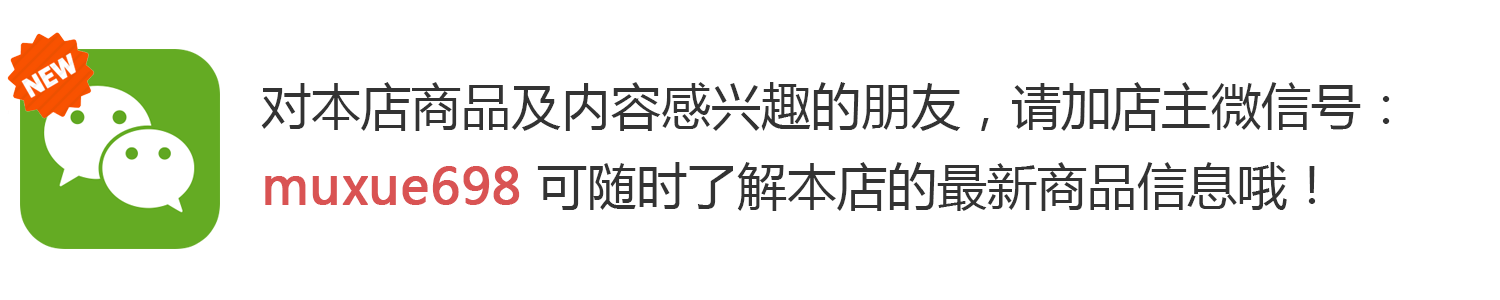
<style>
.page{position:relative;width:1500px;height:300px;background:#ffffff}
.page>*{position:absolute;margin:0}
.t1{font:50px/80px "MicrosoftYaHei";color:#333333}
.t2{font:50px/80px "MicrosoftYaHei";color:#d95353;font-weight:bold}
</style>
<div class="page">
<p class="t1" style="left:261px;top:82px;width:1129px;height:129px">对本店商品及内容感兴趣的朋友，请加店主微信号：<br><span class="t2">muxue698</span> 可随时了解本店的最新商品信息哦！</p>
</div>
